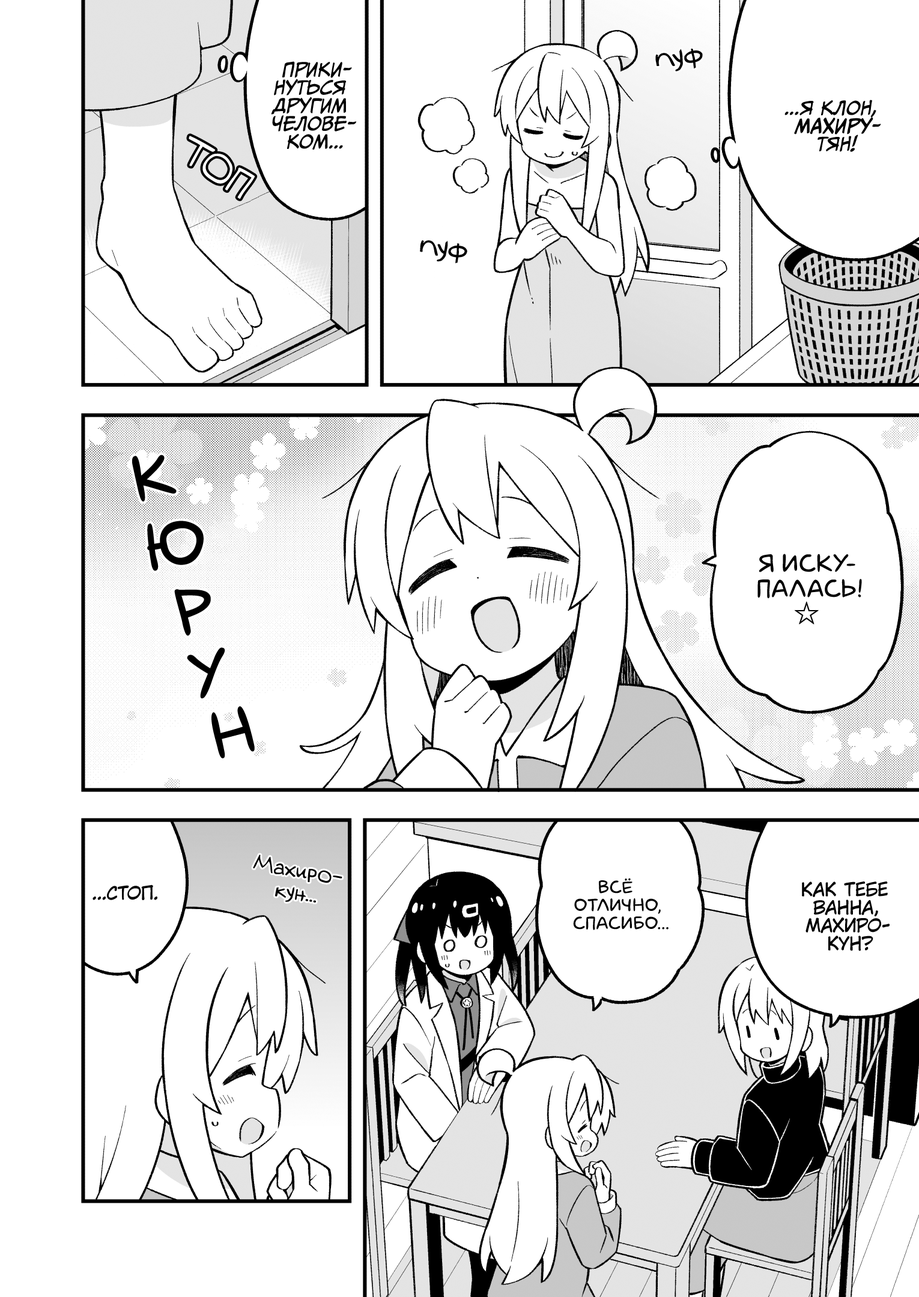
<style>
.page{position:relative;width:919px;height:1297px;background:#ffffff}
.page>*{position:absolute;margin:0}
.t1{font:28.8px "v_Augie";color:#000000}
.t2{font:18px "CCMeanwhile";color:#000000;text-transform:uppercase;font-style:italic}
.t3{font:18px "CCMeanwhile";color:#000000;text-transform:uppercase;font-weight:bold;font-style:italic}
.t4{font:64.9px "laCartoonerie";color:#000000;text-transform:uppercase}
.t5{font:25.2px "laCartoonerie";color:#000000;text-transform:uppercase}
.t6{font:25.2px "KozGoPr6N-Regular";color:#000000;text-transform:uppercase;font-weight:bold}
.t7{font:21.6px "v_Augie";color:#000000}
.t8{font:18px "laCartoonerie";color:#000000;text-transform:uppercase}
.t9{font:18px "KuraiVoice2";color:#000000;text-transform:uppercase}
</style>
<div class="page">
<p class="t1" style="left:655px;top:49px;width:48px;height:22px;rotate:-9deg">пуф</p>
<p class="t2" style="left:271px;top:61px;width:86px;height:89px;text-align:center">Прики-<br>нуться<br>другим<br>челове-<br>ком...</p>
<p class="t2" style="left:784px;top:100px;width:97px;height:52px;text-align:center">...Я клон,<br><span class="t3">Махиру</span>-<br>тян!</p>
<p class="t1" style="left:420px;top:240px;width:47px;height:24px;rotate:6deg">пуф</p>
<p class="t4" style="left:132px;top:455px;width:45px;height:47px;rotate:-11deg">к</p>
<p class="t4" style="left:147px;top:521px;width:57px;height:50px;rotate:-10deg">ю</p>
<p class="t5" style="left:757px;top:554px;width:105px;height:71px;text-align:center">Я иску-<br>палась!<br><span class="t6">☆</span></p>
<p class="t4" style="left:174px;top:589px;width:37px;height:47px;rotate:-5deg">р</p>
<p class="t4" style="left:187px;top:648px;width:38px;height:51px;rotate:-13deg">у</p>
<p class="t4" style="left:211px;top:706px;width:44px;height:53px;rotate:-13deg">н</p>
<p class="t7" style="left:253px;top:855px;width:89px;height:48px;text-align:center;rotate:10deg">Махиро-<br>кун...</p>
<p class="t8" style="left:573px;top:878px;width:96px;height:52px;text-align:center">Всё<br>отлично,<br>спасибо...</p>
<p class="t9" style="left:802px;top:882px;width:88px;height:69px;text-align:center">Как тебе<br>ванна,<br>Махиро-<br>кун?</p>
<p class="t9" style="left:93px;top:885px;width:64px;height:15px">...Стоп.</p>
</div>
